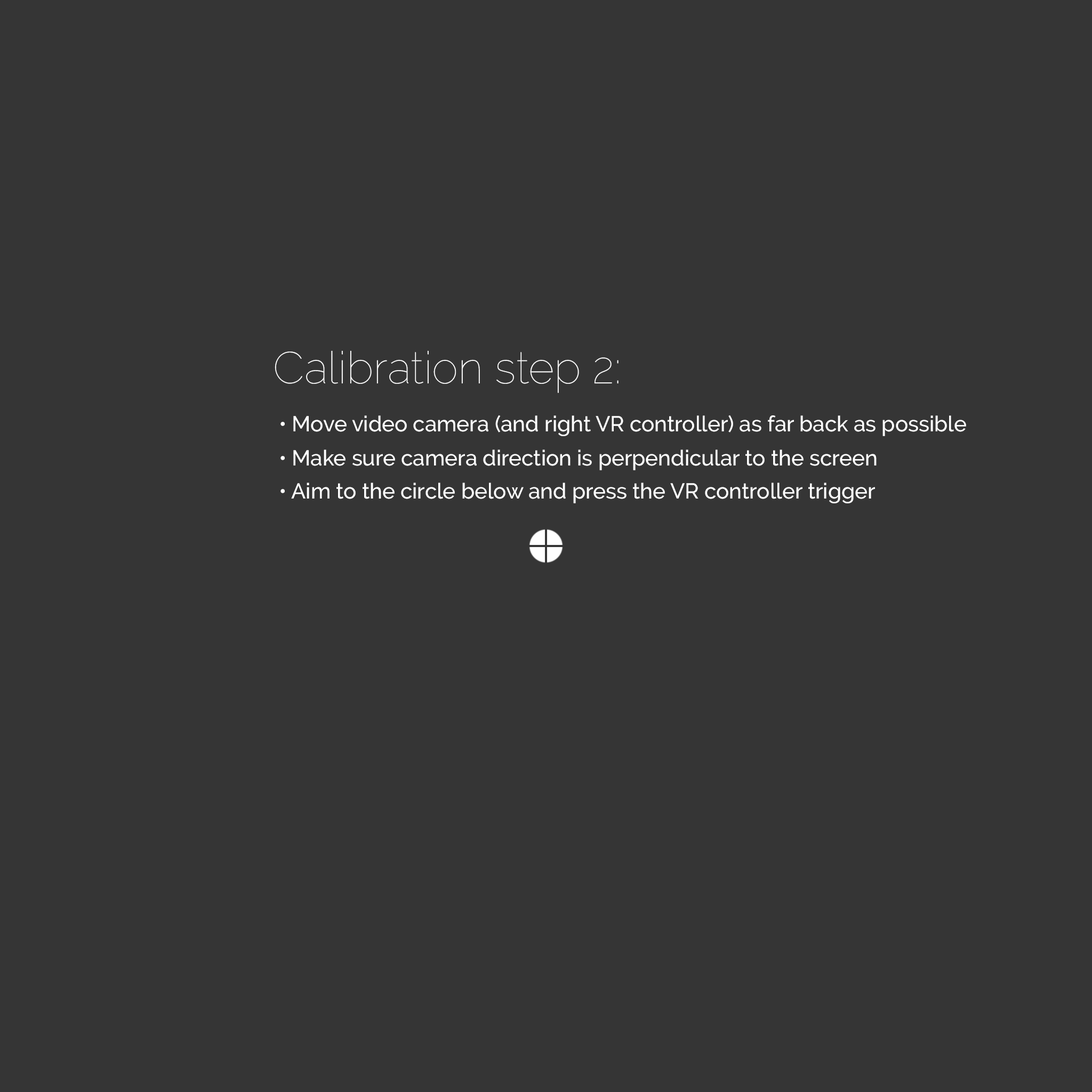
<style>
.page{position:relative;width:1092px;height:1092px;background:#353535}
.page>*{position:absolute;margin:0}
.t1{font:44.5px "Raleway-Thin";color:#ffffff}
.t2{font:21.5px "Raleway-Medium";color:#ffffff}
</style>
<div class="page">
<p class="t1" style="left:275px;top:350px;width:344px;height:43px">Calibration step 2:</p>
<p class="t2" style="left:280px;top:415px;width:686px;height:21px">• Move video camera (and right VR controller) as far back as possible</p>
<p class="t2" style="left:280px;top:449px;width:597px;height:21px">• Make sure camera direction is perpendicular to the screen</p>
<p class="t2" style="left:280px;top:483px;width:595px;height:20px">• Aim to the circle below and press the VR controller trigger</p>
</div>
